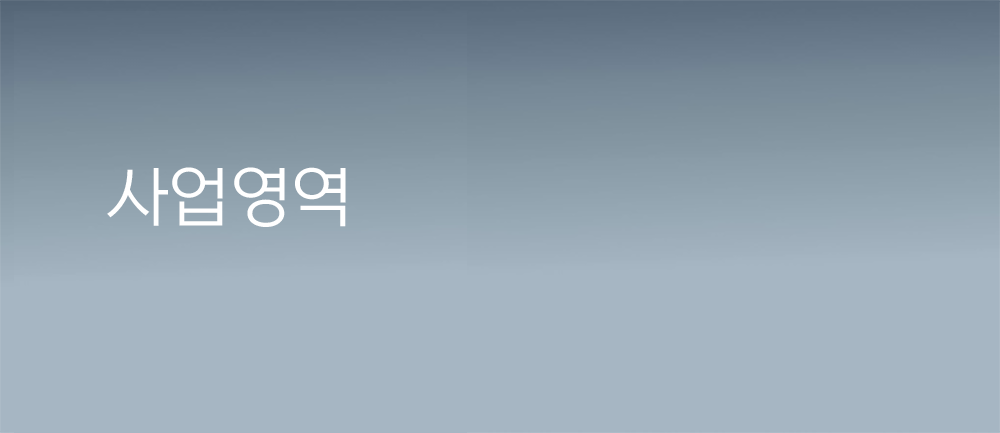
<style>
.page{position:relative;width:1000px;height:433px;background:#a6b6c3}
.page>*{position:absolute;margin:0}
.t1{font:65px "NEXONLv1GothicLowOTFRegular";color:#ffffff}
</style>
<div class="page">
<p class="t1" style="left:107px;top:167px;width:239px;height:60px">사업영역</p>
</div>
